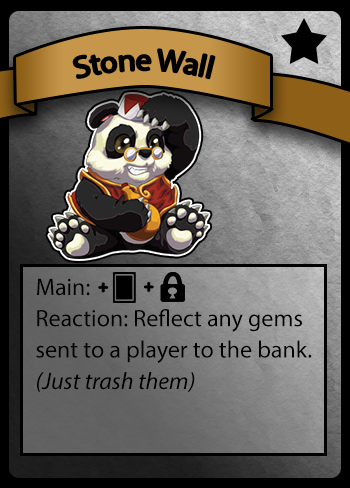
<style>
.page{position:relative;width:350px;height:488px}
.page>*{position:absolute;margin:0}
.t1{font:30px "MyriadPro-Regular";color:#000000}
.t2{font:24px "MyriadPro-Regular";color:#000000}
.t3{font:24px "MyriadPro-It";color:#000000}
</style>
<div class="page">
<p class="t1" style="left:73px;top:49px;width:142px;height:30px">Stone Wall</p>
<p class="t2" style="left:36px;top:278px;width:276px;height:114px">Main:<br>Reaction: Reflect any gems <br>sent to a player to the bank.<br><span class="t3">(Just trash them)</span></p>
</div>
